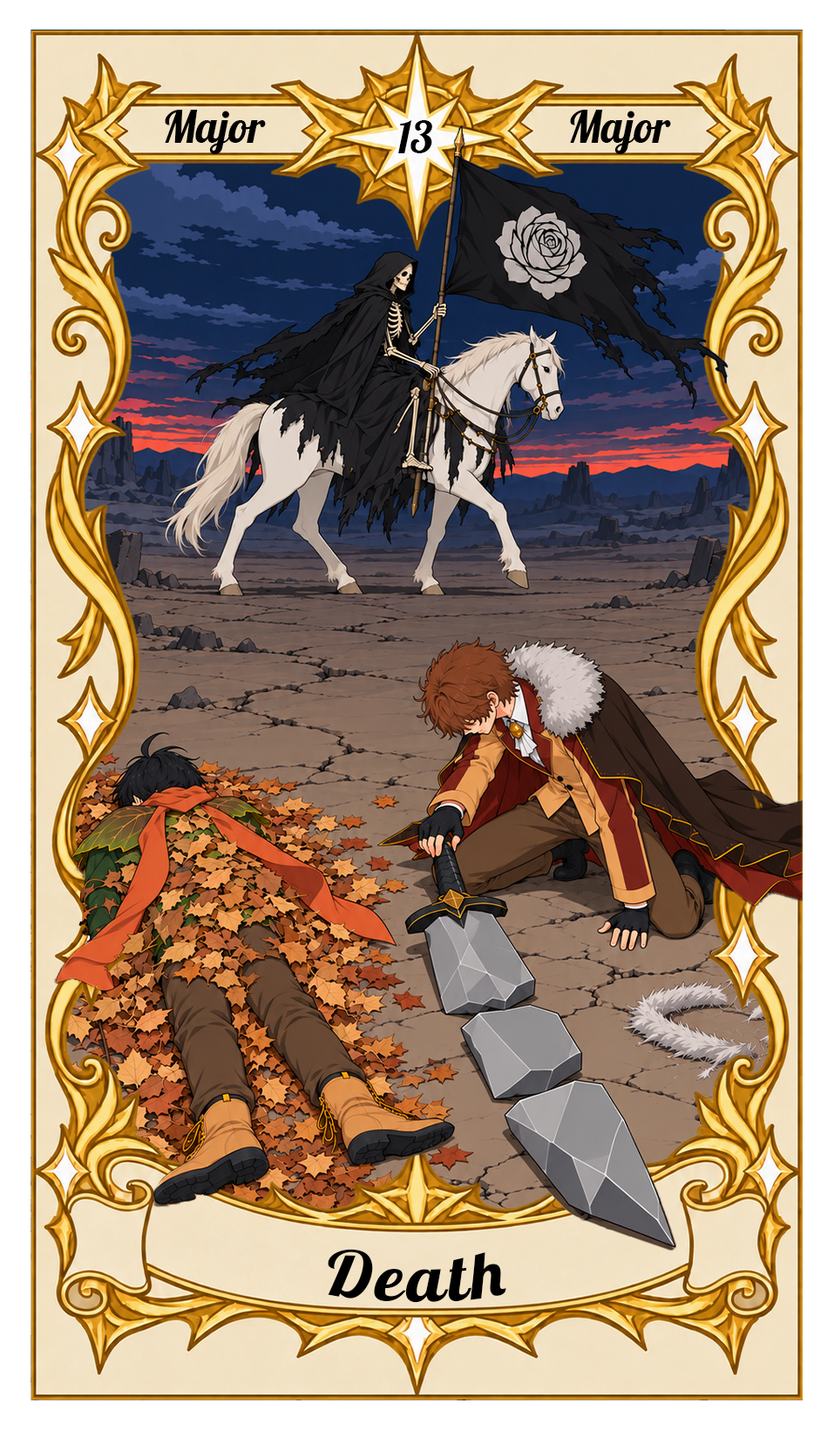
<style>
.page{position:relative;width:834px;height:1430px}
.page>*{position:absolute;margin:0}
.t1{font:43.6px "Lobster-Regular";color:#000000}
.t2{font:65.3px "Lobster-Regular";letter-spacing:0.05em;color:#000000}
</style>
<div class="page">
<p class="t1" style="left:165px;top:110px;width:101px;height:44px">Major</p>
<p class="t1" style="left:570px;top:110px;width:101px;height:44px">Major</p>
<p class="t1" style="left:398px;top:120px;width:34px;height:33px">13</p>
<p class="t2" style="left:328px;top:1249px;width:178px;height:54px">Death</p>
</div>
